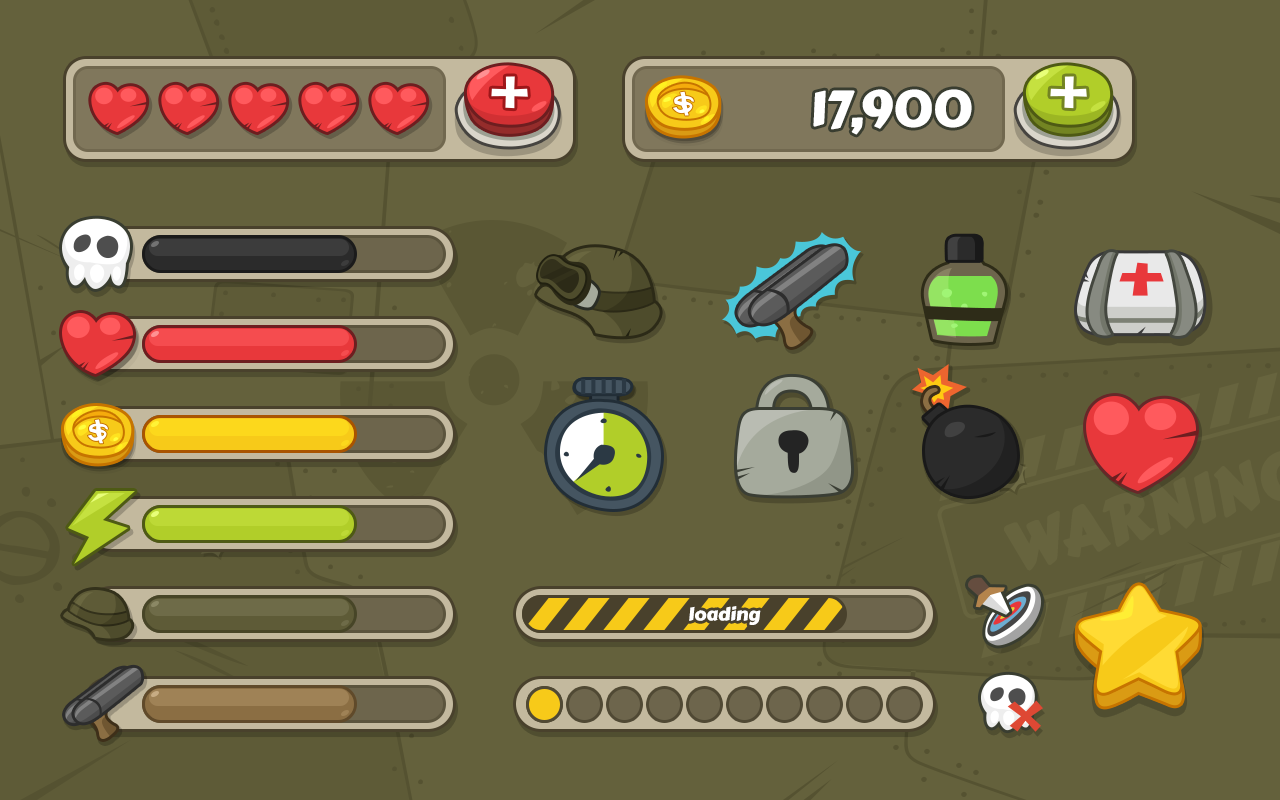
<style>
.page{position:relative;width:1280px;height:800px;background:#64613c}
.page>*{position:absolute;margin:0}
.t1{font:50px "CarterOne";color:#ffffff;text-transform:uppercase}
.t2{font:17.7px "CarterOne";color:#ffffff;scale:1.07 1}
</style>
<div class="page">
<p class="t1" style="left:813px;top:89px;width:159px;height:46px">17,900</p>
<p class="t2" style="left:689px;top:606px;width:72px;height:19px">loading</p>
</div>
